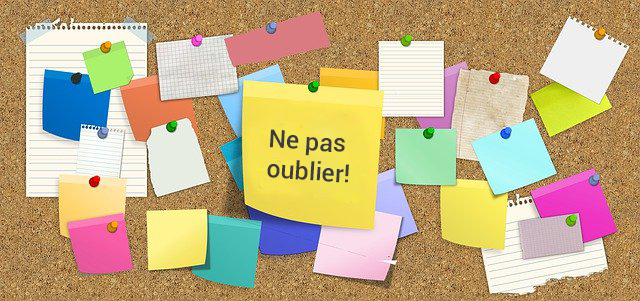
<style>
.page{position:relative;width:640px;height:301px}
.page>*{position:absolute;margin:0}
.t1{font:25px "Roboto-Medium";color:#3c3c3c}
.t2{font:20px "Roboto-Medium";color:#3c3c3c}
</style>
<div class="page">
<p class="t1" style="left:267px;top:129px;width:82px;height:54px;text-align:center;rotate:4deg"><span class="t2"><br></span>Ne pas <br>oublier!</p>
</div>
